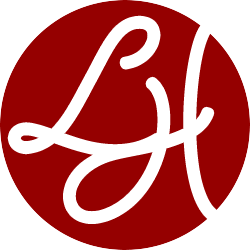
<style>
.page{position:relative;width:250px;height:250px;background:#950000}
.page>*{position:absolute;margin:0}
.t1{font:102.5px "Mina-Regular";color:#ffffff;font-weight:bold}
.t2{font:100px "Mina-Regular";color:#ffffff;font-weight:bold}
</style>
<div class="page">
<p class="t1" style="left:12px;top:20px;width:147px;height:133px;rotate:-7deg">L</p>
<p class="t2" style="left:68px;top:24px;width:171px;height:197px;rotate:-24deg">H</p>
</div>
